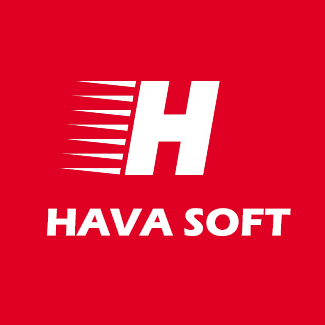
<style>
.page{position:relative;width:325px;height:325px;background:#df0024}
.page>*{position:absolute;margin:0}
.t1{font:40px "ErasITC-Bold";color:#ffffff}
</style>
<div class="page">
<p class="t1" style="left:47px;top:208px;width:244px;height:28px">HAVA SOFT</p>
</div>
